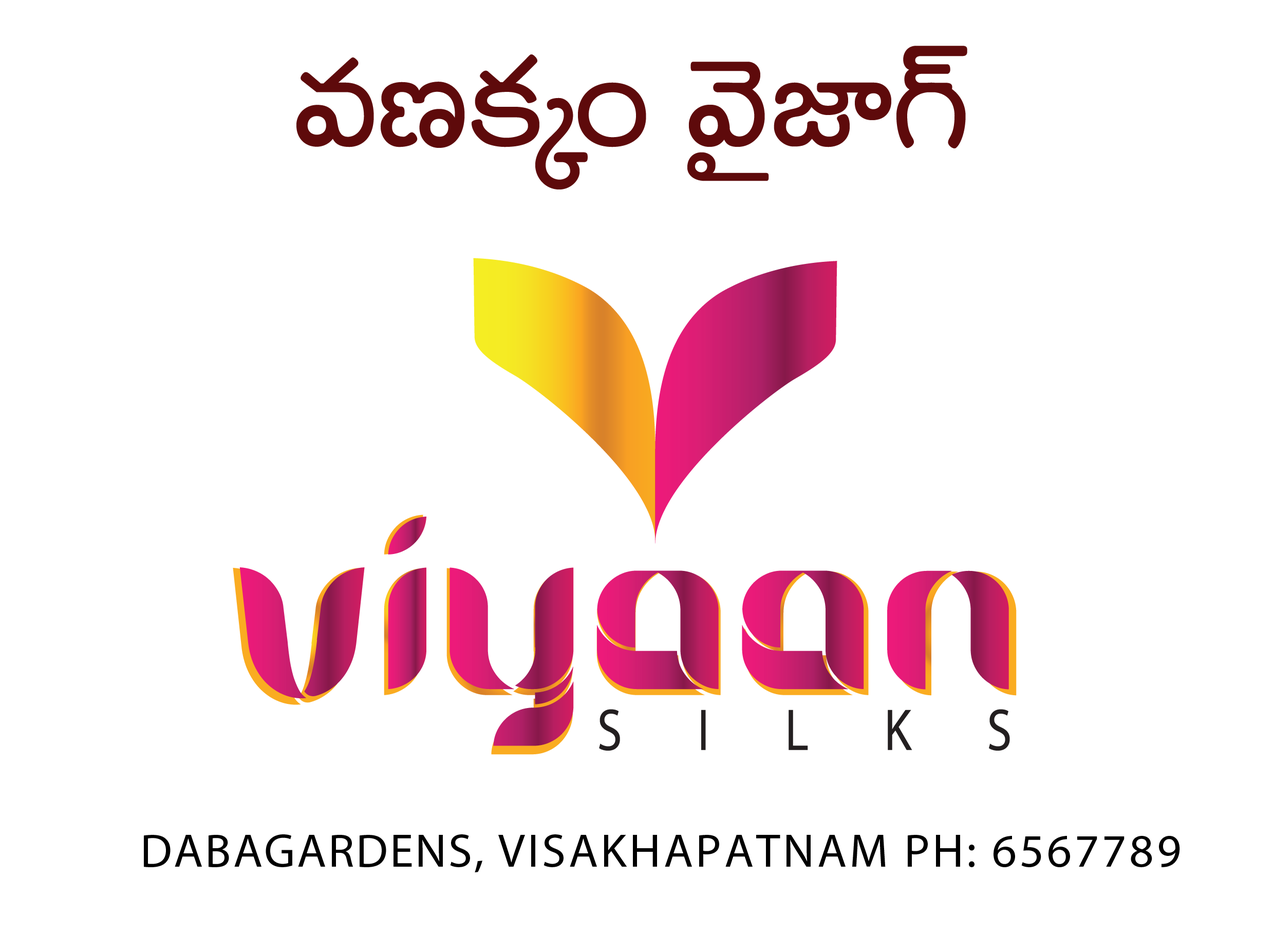
<style>
.page{position:relative;width:1274px;height:936px;background:#ffffff}
.page>*{position:absolute;margin:0}
.t1{font:195.5px "RachanaBold";color:#5e0a0b}
.t2{font:47px "MyriadPro-Regular";letter-spacing:0.06em;color:#000000;text-transform:uppercase}
.t3{font:47px "MyriadPro-Regular";letter-spacing:0.04em;color:#000000;text-transform:uppercase}
</style>
<div class="page">
<p class="t1" style="left:296px;top:46px;width:671px;height:144px">eDø£ÿ+ yÓ’C≤&gt;˘</p>
<p class="t2" style="left:144px;top:835px;width:1036px;height:38px"><span class="t3">Dabagardens, </span>Visakhapatnam Ph: 6567789</p>
</div>
